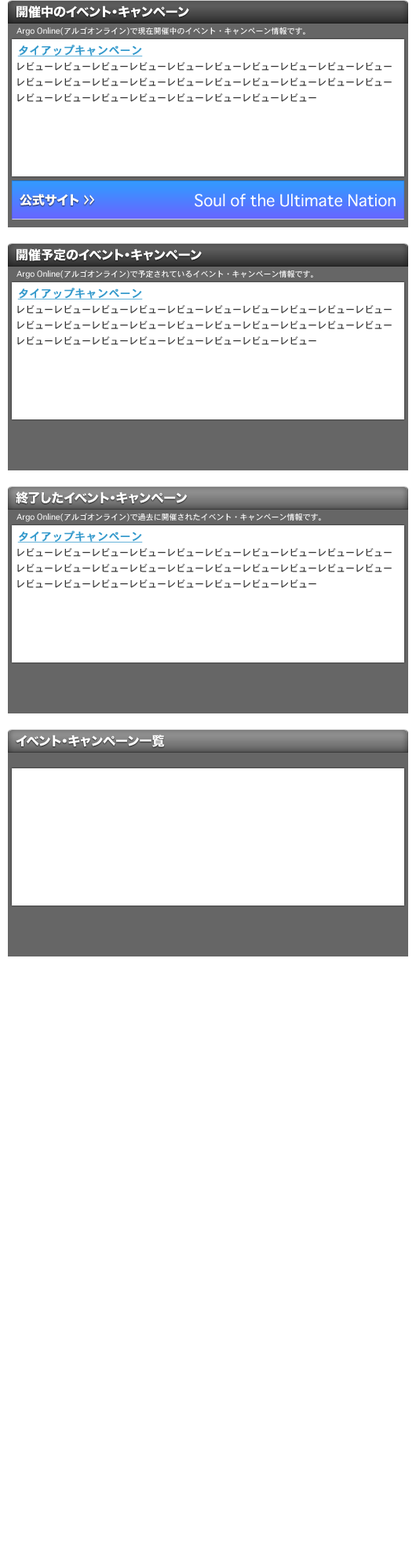
<style>
.page{position:relative;width:416px;height:1568px;background:#ffffff}
.page>*{position:absolute;margin:0}
.t1{font:12.5px "HiraKakuStd-W8";color:#ffffff}
.t2{font:7.8px "Osaka";color:#ffffff}
.t3{font:11px "Osaka";color:#3399cc;font-weight:bold;text-decoration:underline}
.t4{font:9.4px/15.7px "Osaka";color:#333333}
.t5{font:12.5px "HiraKakuStd-W8";color:#fffefe}
.t6{font:12.5px "HiraKakuStd-W8";color:#fffefe;scale:0.5 1}
.t7{font:15.7px "Osaka";color:#ffffff}
</style>
<div class="page">
<p class="t1" style="left:16px;top:5px;width:173px;height:13px">開催中のイベント・キャンペーン</p>
<p class="t2" style="left:16px;top:27px;width:289px;height:9px">Argo Online(アルゴオンライン)で現在開催中のイベント・キャンペーン情報です。</p>
<p class="t3" style="left:17px;top:45px;width:126px;height:11px">タイアップキャンペーン</p>
<p class="t4" style="left:17px;top:62px;width:374px;height:40px">レビューレビューレビューレビューレビューレビューレビューレビューレビューレビューレビューレビューレビューレビューレビューレビューレビューレビューレビューレビューレビューレビューレビューレビューレビューレビューレビューレビュー</p>
<p class="t5" style="left:20px;top:194px;width:75px;height:12px">公式サイト <span class="t6">＞＞</span></p>
<p class="t7" style="left:194px;top:194px;width:201px;height:13px">Soul of the Ultimate Nation</p>
<p class="t1" style="left:16px;top:249px;width:185px;height:12px">開催予定のイベント・キャンペーン</p>
<p class="t2" style="left:16px;top:270px;width:297px;height:9px">Argo Online(アルゴオンライン)で予定されているイベント・キャンペーン情報です。</p>
<p class="t3" style="left:17px;top:288px;width:126px;height:11px">タイアップキャンペーン</p>
<p class="t4" style="left:17px;top:305px;width:374px;height:40px">レビューレビューレビューレビューレビューレビューレビューレビューレビューレビューレビューレビューレビューレビューレビューレビューレビューレビューレビューレビューレビューレビューレビューレビューレビューレビューレビューレビュー</p>
<p class="t1" style="left:16px;top:492px;width:171px;height:12px">終了したイベント・キャンペーン</p>
<p class="t2" style="left:16px;top:513px;width:305px;height:9px">Argo Online(アルゴオンライン)で過去に開催されたイベント・キャンペーン情報です。</p>
<p class="t3" style="left:17px;top:531px;width:126px;height:12px">タイアップキャンペーン</p>
<p class="t4" style="left:17px;top:548px;width:374px;height:40px">レビューレビューレビューレビューレビューレビューレビューレビューレビューレビューレビューレビューレビューレビューレビューレビューレビューレビューレビューレビューレビューレビューレビューレビューレビューレビューレビューレビュー</p>
<p class="t1" style="left:16px;top:735px;width:149px;height:12px">イベント・キャンペーン一覧</p>
</div>
